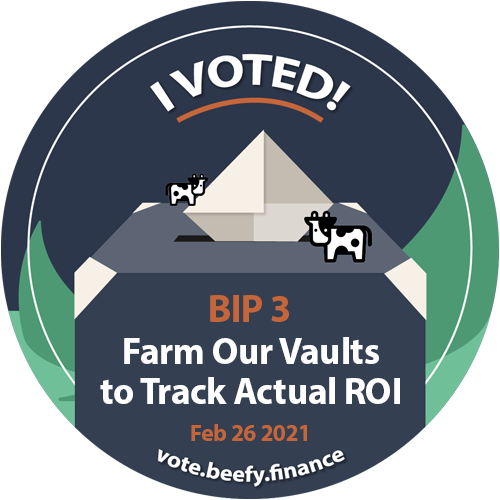
<style>
.page{position:relative;width:500px;height:500px;background:#ffffff}
.page>*{position:absolute;margin:0}
.t1{font:39.5px "MyriadPro-Bold";letter-spacing:-0.01em;color:#c66639}
.t2{font:38.1px/39.6px "MyriadPro-Bold";letter-spacing:-0.01em;color:#ffffff}
.t3{font:38.1px/1.2px "MyriadPro-Bold";letter-spacing:-0.01em;color:#ffffff}
.t4{font:23.7px "MyriadPro-Bold";letter-spacing:-0.01em;color:#c66639}
</style>
<div class="page">
<p class="t1" style="left:210px;top:295px;width:79px;height:27px">BIP 3</p>
<p class="t2" style="left:100px;top:337px;width:300px;height:67px;text-align:center"><span class="t3">Farm Our Vaults<br></span>to Track Actual ROI</p>
<p class="t4" style="left:191px;top:424px;width:116px;height:17px">Feb 26 2021</p>
</div>
